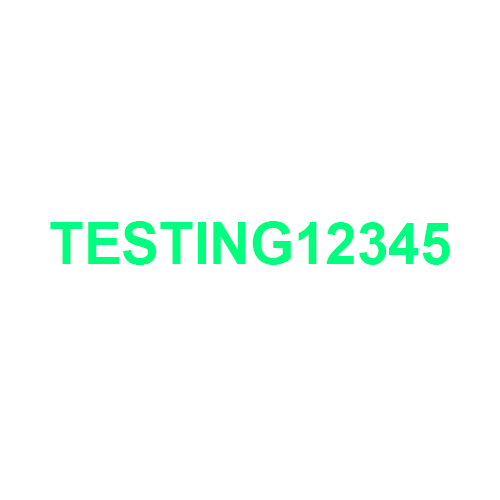
<style>
.page{position:relative;width:500px;height:500px;background:#ffffff}
.page>*{position:absolute;margin:0}
.t1{font:59.2px "Arial-BoldMT";letter-spacing:-0.005em;color:#00ff7e;scale:0.96 1}
</style>
<div class="page">
<p class="t1" style="left:50px;top:221px;width:400px;height:44px">TESTING12345</p>
</div>
